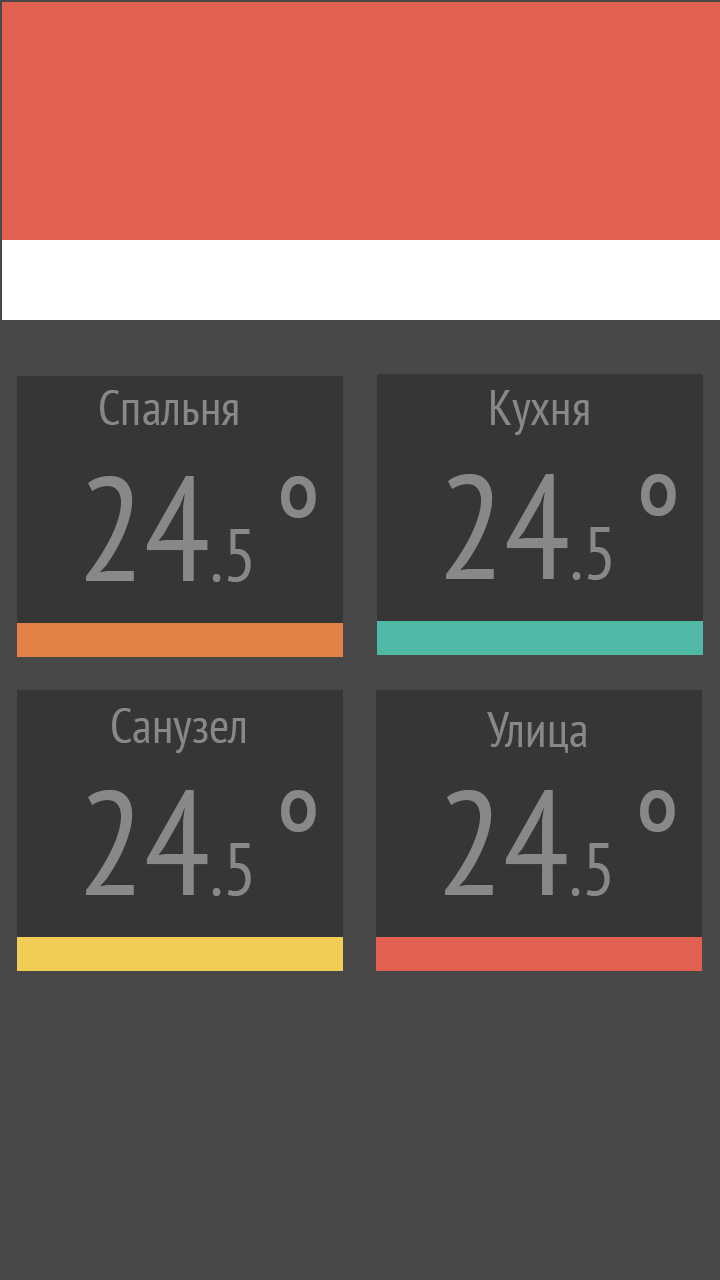
<style>
.page{position:relative;width:720px;height:1280px;background:#484848}
.page>*{position:absolute;margin:0}
.t1{font:49px "PTSans-Narrow";color:#888888}
.t2{font:147px "PTSans-Narrow";color:#888888}
.t3{font:73.5px "PTSans-Narrow";color:#888888}
</style>
<div class="page">
<p class="t1" style="left:100px;top:390px;width:138px;height:35px">Спальня</p>
<p class="t1" style="left:491px;top:390px;width:98px;height:45px">Кухня</p>
<p class="t2" style="left:86px;top:476px;width:230px;height:106px">24<span class="t3">.5 </span>°</p>
<p class="t2" style="left:446px;top:474px;width:230px;height:106px">24<span class="t3">.5 </span>°</p>
<p class="t1" style="left:112px;top:708px;width:133px;height:45px">Санузел</p>
<p class="t1" style="left:487px;top:712px;width:100px;height:41px">Улица</p>
<p class="t2" style="left:86px;top:790px;width:230px;height:106px">24<span class="t3">.5 </span>°</p>
<p class="t2" style="left:445px;top:790px;width:230px;height:106px">24<span class="t3">.5 </span>°</p>
</div>
